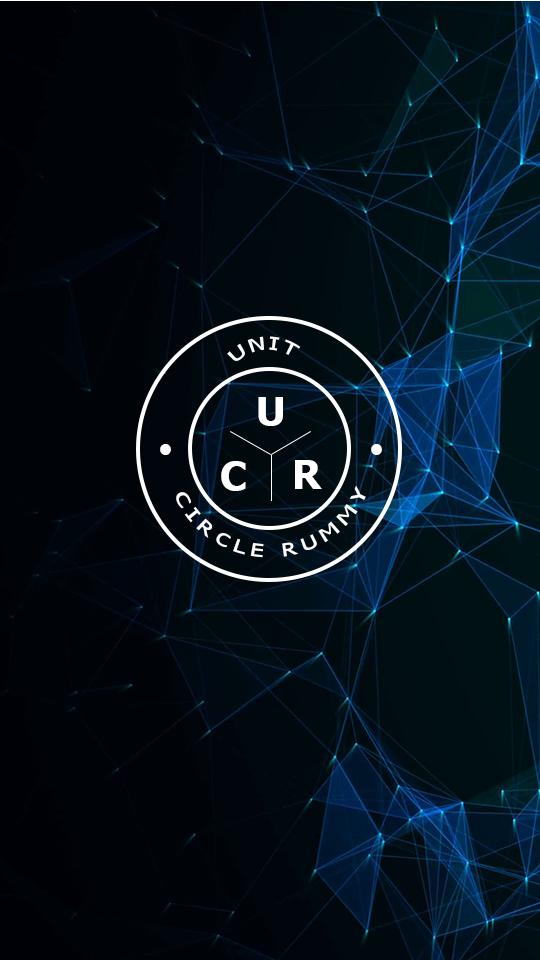
<style>
.page{position:relative;width:540px;height:960px;background:#000308}
.page>*{position:absolute;margin:0}
.t1{font:18px "Tahoma";letter-spacing:0.2em;color:#ffffff}
.t2{font:40px "Tahoma-Bold";letter-spacing:0.2em;color:#ffffff}
.t3{font:72px "Athelas-Bold";letter-spacing:0.2em;color:#ffffff}
</style>
<div class="page">
<p class="t1" style="left:227px;top:336px;width:74px;height:25px;rotate:-3deg">UNIT</p>
<p class="t2" style="left:258px;top:397px;width:25px;height:29px">U</p>
<p class="t3" style="left:160px;top:444px;width:11px;height:11px">.</p>
<p class="t3" style="left:371px;top:444px;width:11px;height:11px">.</p>
<p class="t2" style="left:221px;top:461px;width:25px;height:30px">C</p>
<p class="t2" style="left:295px;top:460px;width:27px;height:29px">R</p>
<p class="t1" style="left:176px;top:485px;width:190px;height:73px;rotate:-3deg">CIRCLE RUMMY</p>
</div>
